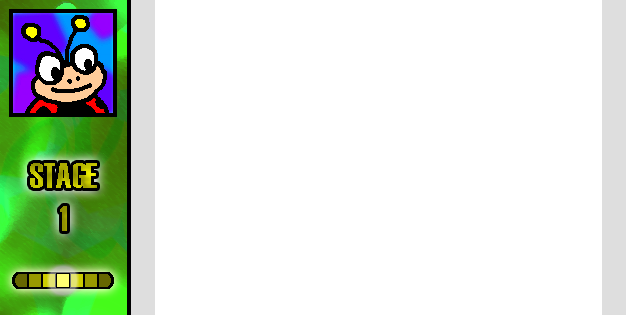
<style>
.page{position:relative;width:626px;height:315px;background:#ffffff}
.page>*{position:absolute;margin:0}
.t1{font:36px "Haettenschweiler"}
</style>
<div class="page">
<p class="t1" style="left:30px;top:163px;width:67px;height:68px;text-align:center">STAGE<br>1</p>
</div>
